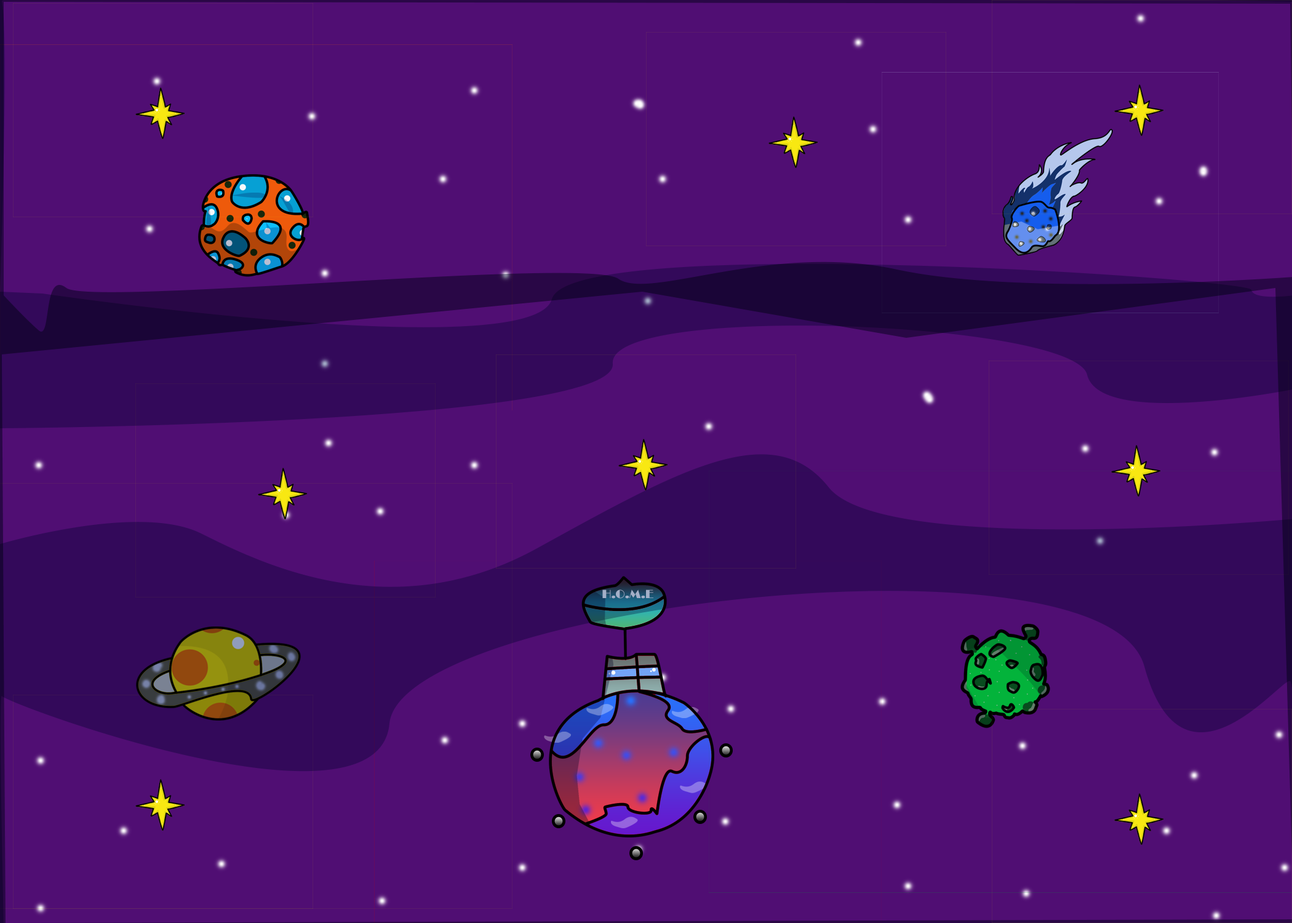
<style>
.page{position:relative;width:1292px;height:923px;background:#500e73}
.page>*{position:absolute;margin:0}
.t1{font:12.1px "Broadway";color:#a3afc8}
</style>
<div class="page">
<p class="t1" style="left:602px;top:589px;width:51px;height:10px">H.O.M.E</p>
</div>
